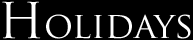
<style>
.page{position:relative;width:193px;height:40px;background:#000000}
.page>*{position:absolute;margin:0}
.t1{font:36px "TrajanPro-Regular";color:#ffffff}
.t2{font:48px "TrajanPro-Regular";color:#ffffff}
</style>
<div class="page">
<p class="t1" style="left:2px;top:1px;width:189px;height:38px"><span class="t2">H</span>olidays</p>
</div>
